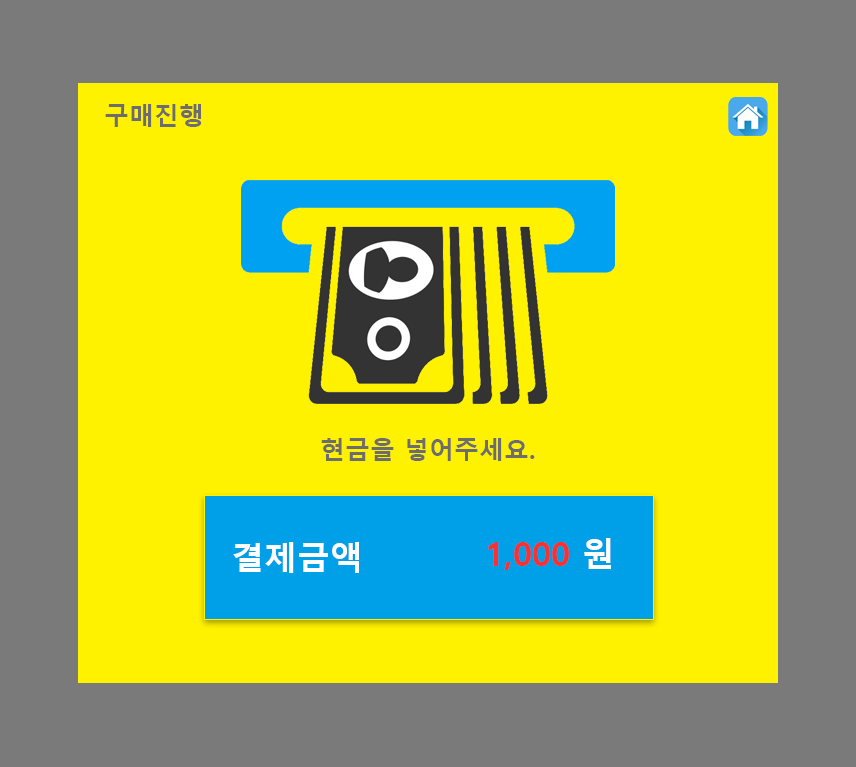
<style>
.page{position:relative;width:856px;height:767px;background:#fff200}
.page>*{position:absolute;margin:0}
.t1{font:25px "MalgunGothicBold";color:#6d6d6d}
.t2{font:33px "MalgunGothicBold";color:#ffffff}
.t3{font:33px "MalgunGothicBold";color:#f63232}
</style>
<div class="page">
<p class="t1" style="left:105px;top:104px;width:97px;height:23px">구매진행</p>
<p class="t1" style="left:321px;top:438px;width:214px;height:23px">현금을 넣어주세요.</p>
<p class="t2" style="left:233px;top:542px;width:126px;height:31px">결제금액</p>
<p class="t3" style="left:488px;top:538px;width:123px;height:32px">1,000<span class="t2"> 원</span></p>
</div>
